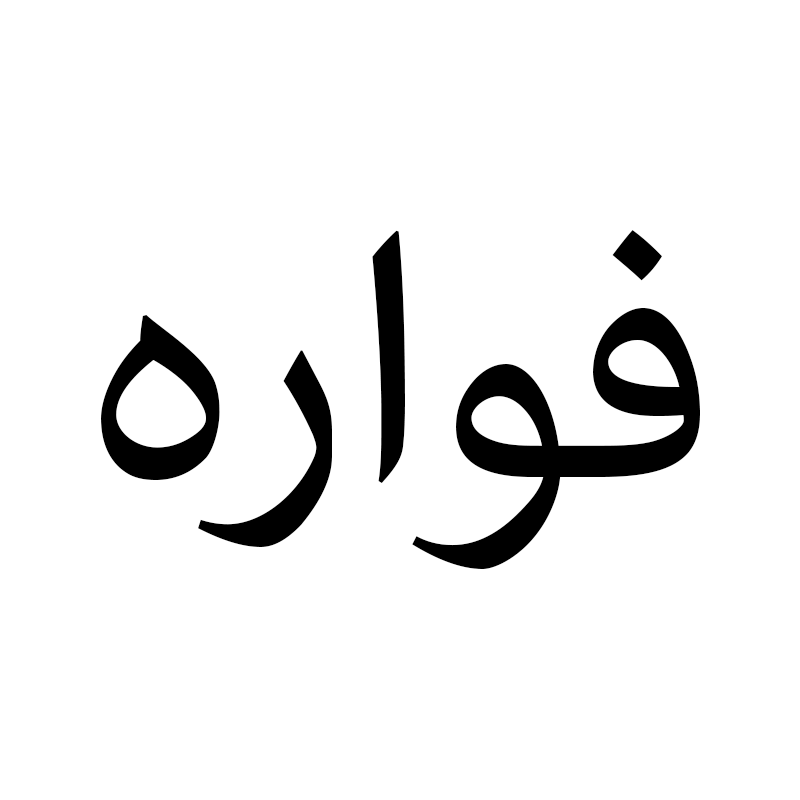
<style>
.page{position:relative;width:800px;height:800px;background:#ffffff}
.page>*{position:absolute;margin:0}
.t1{font:500px "AdobeArabic-Regular";color:#000000}
</style>
<div class="page">
<p class="t1" style="left:101px;top:230px;width:599px;height:340px">فوارہ</p>
</div>
